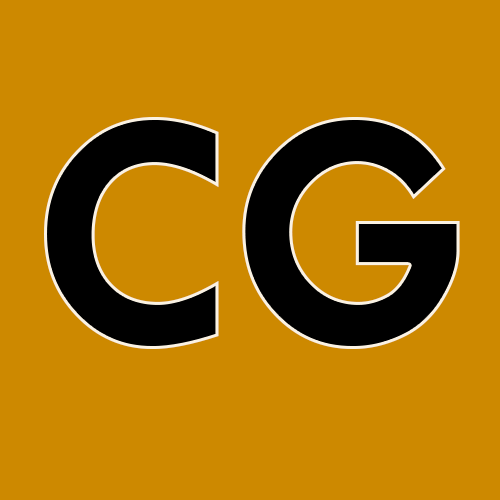
<style>
.page{position:relative;width:500px;height:500px;background:#cd8900}
.page>*{position:absolute;margin:0}
.t1{font:350px "TwCenMT-Bold";color:#000000}
</style>
<div class="page">
<p class="t1" style="left:44px;top:117px;width:416px;height:232px">CG</p>
</div>
